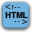
<style>
.page{position:relative;width:32px;height:32px;background:#71b4e2}
.page>*{position:absolute;margin:0}
.t1{font:8.2px "Helvetica"}
.t2{font:5.5px "Helvetica";color:#282727}
.t3{font:8.2px "Helvetica-Bold";color:#111111}
</style>
<div class="page">
<p class="t1" style="left:5px;top:4px;width:6px;height:5px">&lt;</p>
<p class="t2" style="left:12px;top:4px;width:8px;height:6px">! - -</p>
<p class="t3" style="left:5px;top:11px;width:23px;height:8px">HTML</p>
<p class="t2" style="left:14px;top:21px;width:6px;height:1px">- -</p>
<p class="t1" style="left:22px;top:19px;width:6px;height:5px">&gt;</p>
</div>
